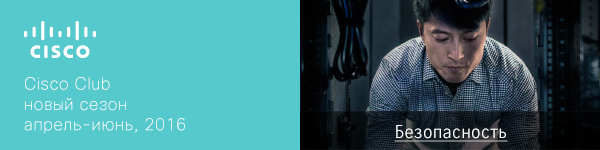
<style>
.page{position:relative;width:600px;height:150px;background:#56c9cd}
.page>*{position:absolute;margin:0}
.t1{font:16.9px "CiscoSansTT-ExtraLight";letter-spacing:0.025em;color:#ffffff}
.t2{font:18px "CiscoScreen-Light";letter-spacing:0.025em;color:#ffffff;text-decoration:underline}
</style>
<div class="page">
<p class="t1" style="left:24px;top:77px;width:161px;height:57px">Cisco Club <br>новый сезон<br>апрель-июнь, 2016</p>
<p class="t2" style="left:394px;top:125px;width:114px;height:17px">Безопасность</p>
</div>
